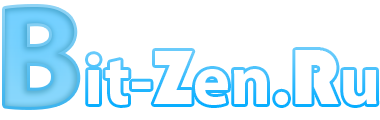
<style>
.page{position:relative;width:380px;height:120px;background:#ffffff}
.page>*{position:absolute;margin:0}
.t1{font:146px "MyriadPro-Bold";color:#74cef9}
.t2{font:71px "MyriadPro-Bold";color:#ffffff}
.t3{font:71px "GillSans-UltraBoldCondensed";color:#ffffff}
.t4{font:81px "Bauhaus93";color:#ffffff}
</style>
<div class="page">
<p class="t1" style="left:5px;top:7px;width:73px;height:100px">B</p>
<p class="t2" style="left:88px;top:50px;width:289px;height:55px">it-<span class="t3">Z</span>en.<span class="t4">R</span>u</p>
</div>
